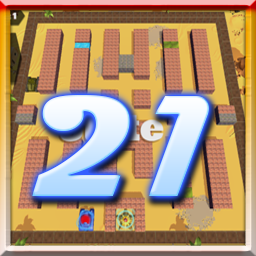
<style>
.page{position:relative;width:256px;height:256px}
.page>*{position:absolute;margin:0}
.t1{font:144.8px "Magneto-Bold";letter-spacing:0.02em;scale:1.09 1}
</style>
<div class="page">
<p class="t1" style="left:32px;top:95px;width:177px;height:101px">21</p>
</div>
